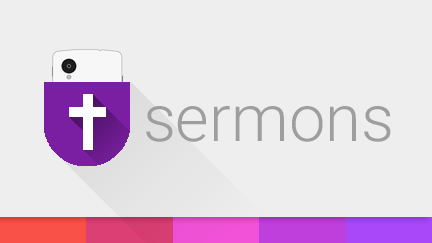
<style>
.page{position:relative;width:432px;height:243px;background:#eeeeee}
.page>*{position:absolute;margin:0}
.t1{font:65px "Roboto-Light";color:#9e9e9e}
</style>
<div class="page">
<p class="t1" style="left:146px;top:106px;width:245px;height:36px">sermons</p>
</div>
